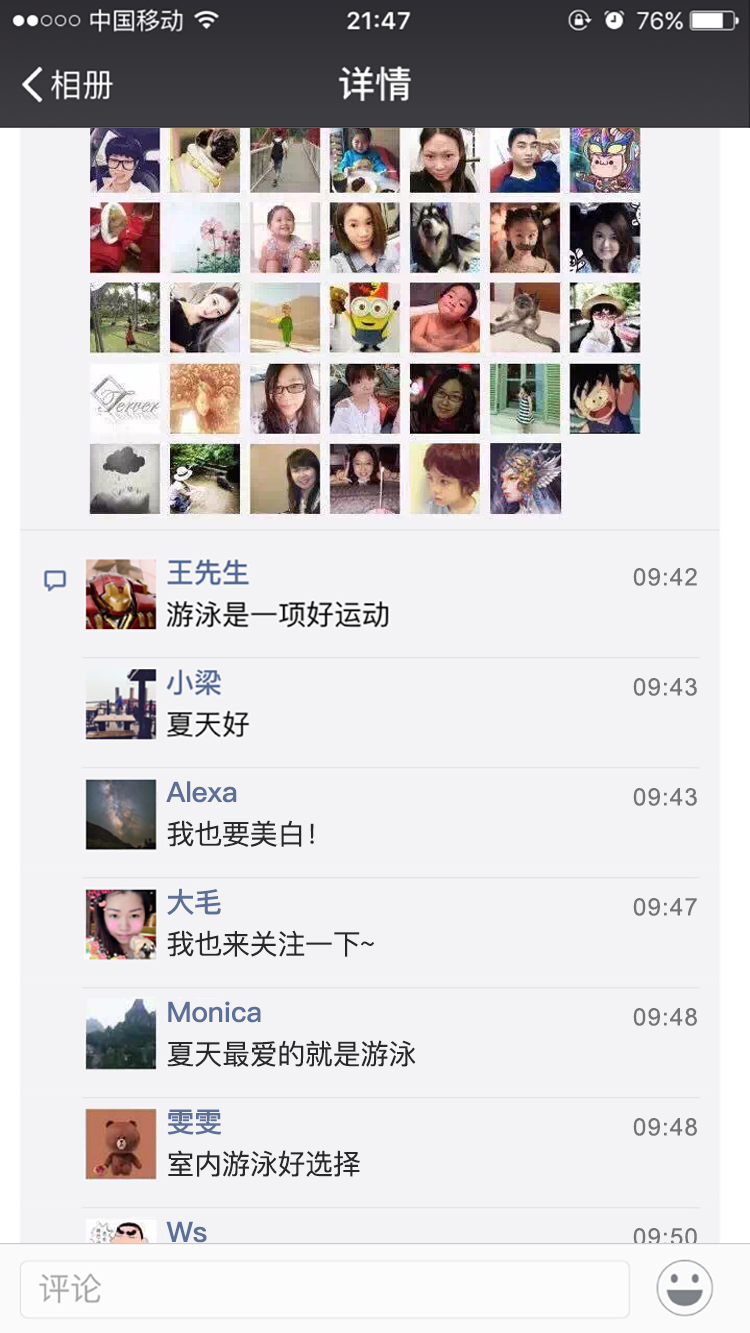
<style>
.page{position:relative;width:750px;height:1333px;background:#f3f3f5}
.page>*{position:absolute;margin:0}
.t1{font:24px "ArialMT";letter-spacing:0.05em;color:#747474}
.t2{font:28px "PingFangSC-Medium";letter-spacing:-0.01em;color:#5b6f97}
.t3{font:28px "PingFangSC-Regular";letter-spacing:-0.01em;color:#282828}
</style>
<div class="page">
<p class="t1" style="left:633px;top:568px;width:64px;height:18px">09:42</p>
<p class="t1" style="left:633px;top:678px;width:64px;height:18px">09:43</p>
<p class="t2" style="left:166px;top:781px;width:71px;height:22px">Alexa</p>
<p class="t1" style="left:633px;top:788px;width:64px;height:18px">09:43</p>
<p class="t3" style="left:167px;top:820px;width:147px;height:27px">我也要美白！</p>
<p class="t2" style="left:167px;top:888px;width:54px;height:27px">大毛</p>
<p class="t1" style="left:633px;top:898px;width:64px;height:18px">09:47</p>
<p class="t3" style="left:167px;top:930px;width:208px;height:27px">我也来关注一下~</p>
<p class="t2" style="left:168px;top:1001px;width:93px;height:22px">Monica</p>
<p class="t1" style="left:633px;top:1008px;width:64px;height:18px">09:48</p>
<p class="t3" style="left:167px;top:1040px;width:249px;height:27px">夏天最爱的就是游泳</p>
<p class="t2" style="left:167px;top:1109px;width:55px;height:26px">雯雯</p>
<p class="t1" style="left:633px;top:1118px;width:64px;height:18px">09:48</p>
<p class="t3" style="left:168px;top:1150px;width:192px;height:27px">室内游泳好选择</p>
<p class="t2" style="left:166px;top:1221px;width:41px;height:22px">Ws</p>
<p class="t1" style="left:633px;top:1228px;width:64px;height:18px">09:50</p>
</div>
